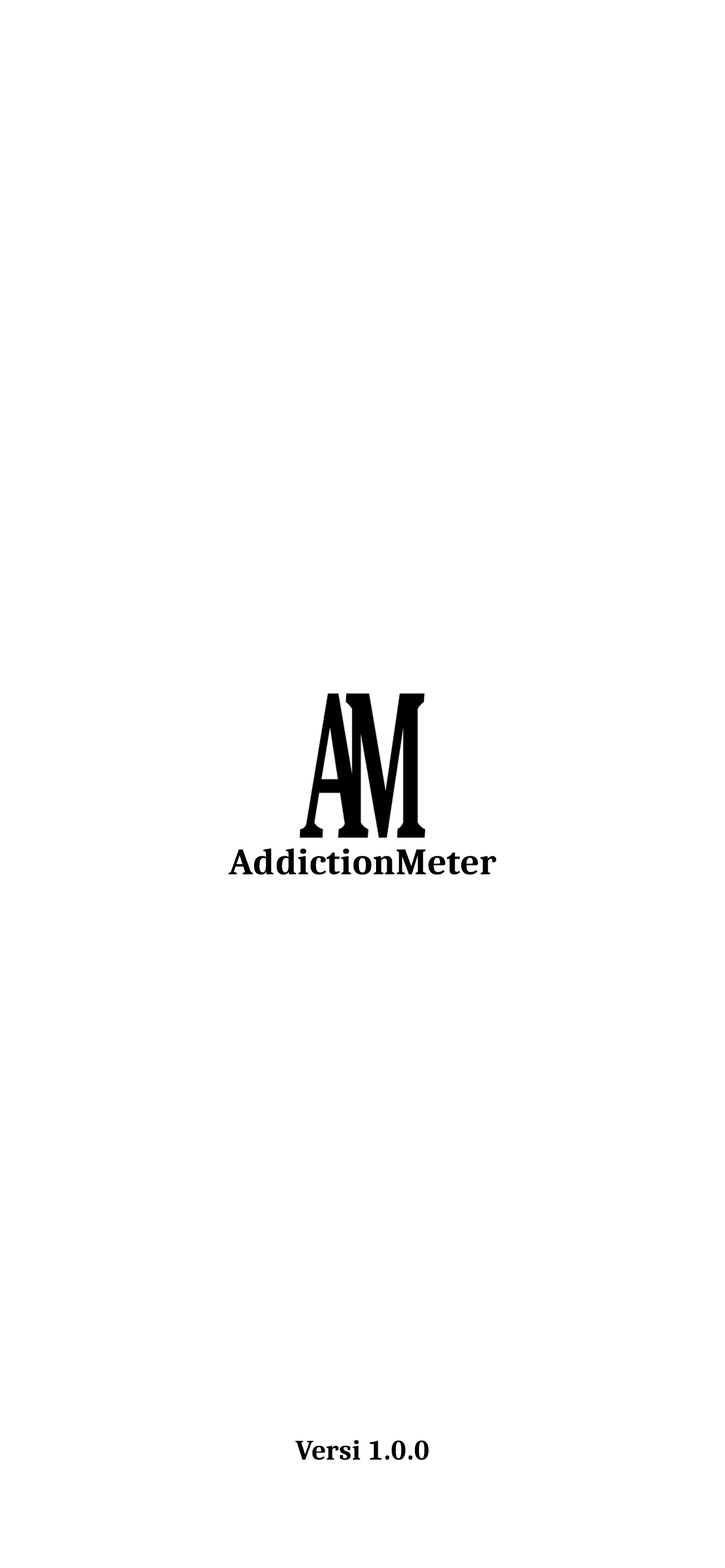
<style>
.page{position:relative;width:725px;height:1568px;background:#ffffff}
.page>*{position:absolute;margin:0}
.t1{font:37.3px "Caladea-Bold";color:#000000}
.t2{font:28.2px "Caladea-Bold";color:#000000}
</style>
<div class="page">
<p class="t1" style="left:228px;top:848px;width:268px;height:27px">AddictionMeter</p>
<p class="t2" style="left:295px;top:1440px;width:133px;height:20px">Versi 1.0.0</p>
</div>
